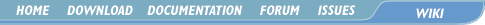
<style>
.page{position:relative;width:485px;height:25px;background:#7cacc1}
.page>*{position:absolute;margin:0}
.t1{font:14px "Humanist521BT-BoldCondensed";color:#ffffff;font-style:italic}
</style>
<div class="page">
<p class="t1" style="left:16px;top:5px;width:339px;height:11px">HOME     DOWNLOAD    DOCUMENTATION     FORUM     ISSUES</p>
<p class="t1" style="left:416px;top:8px;width:28px;height:11px">WIKI</p>
</div>
